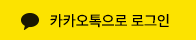
<style>
.page{position:relative;width:196px;height:40px;background:#fce300}
.page>*{position:absolute;margin:0}
.t1{font:15px "Pretendard-SemiBold";color:#000000}
</style>
<div class="page">
<p class="t1" style="left:50px;top:14px;width:119px;height:14px">카카오톡으로 로그인</p>
</div>
